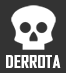
<style>
.page{position:relative;width:66px;height:73px;background:#333333}
.page>*{position:absolute;margin:0}
.t1{font:24px "AgencyFB-Bold";color:#ffffff;font-variant:small-caps;font-weight:bold}
</style>
<div class="page">
<p class="t1" style="left:6px;top:55px;width:55px;height:13px">derrota</p>
</div>
